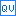
<style>
.page{position:relative;width:16px;height:16px;background:#ffffff}
.page>*{position:absolute;margin:0}
.t1{font:8px "Terminal";color:#005fd4}
</style>
<div class="page">
<p class="t1" style="left:2px;top:5px;width:5px;height:7px">Q</p>
<p class="t1" style="left:9px;top:5px;width:5px;height:7px">V</p>
</div>
